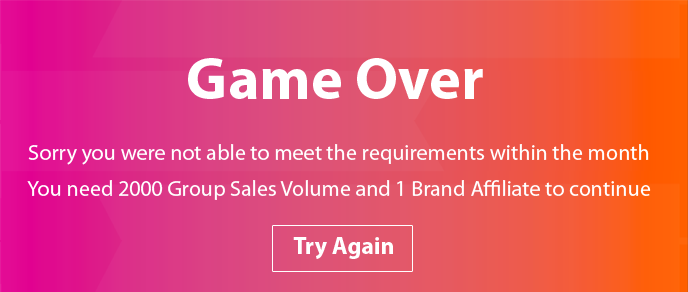
<style>
.page{position:relative;width:688px;height:292px}
.page>*{position:absolute;margin:0}
.t1{font:60px "MyriadPro-Bold";color:#ffffff}
.t2{font:22px "MyriadPro-Regular";color:#ffffff}
.t3{font:24px "MyriadPro-Bold";color:#ffffff}
</style>
<div class="page">
<p class="t1" style="left:188px;top:58px;width:295px;height:41px">Game Over</p>
<p class="t2" style="left:28px;top:144px;width:621px;height:21px">Sorry you were not able to meet the requirements within the month</p>
<p class="t2" style="left:27px;top:180px;width:624px;height:20px">You need 2000 Group Sales Volume and 1 Brand Affiliate to continue</p>
<p class="t3" style="left:293px;top:237px;width:100px;height:22px">Try Again</p>
</div>
